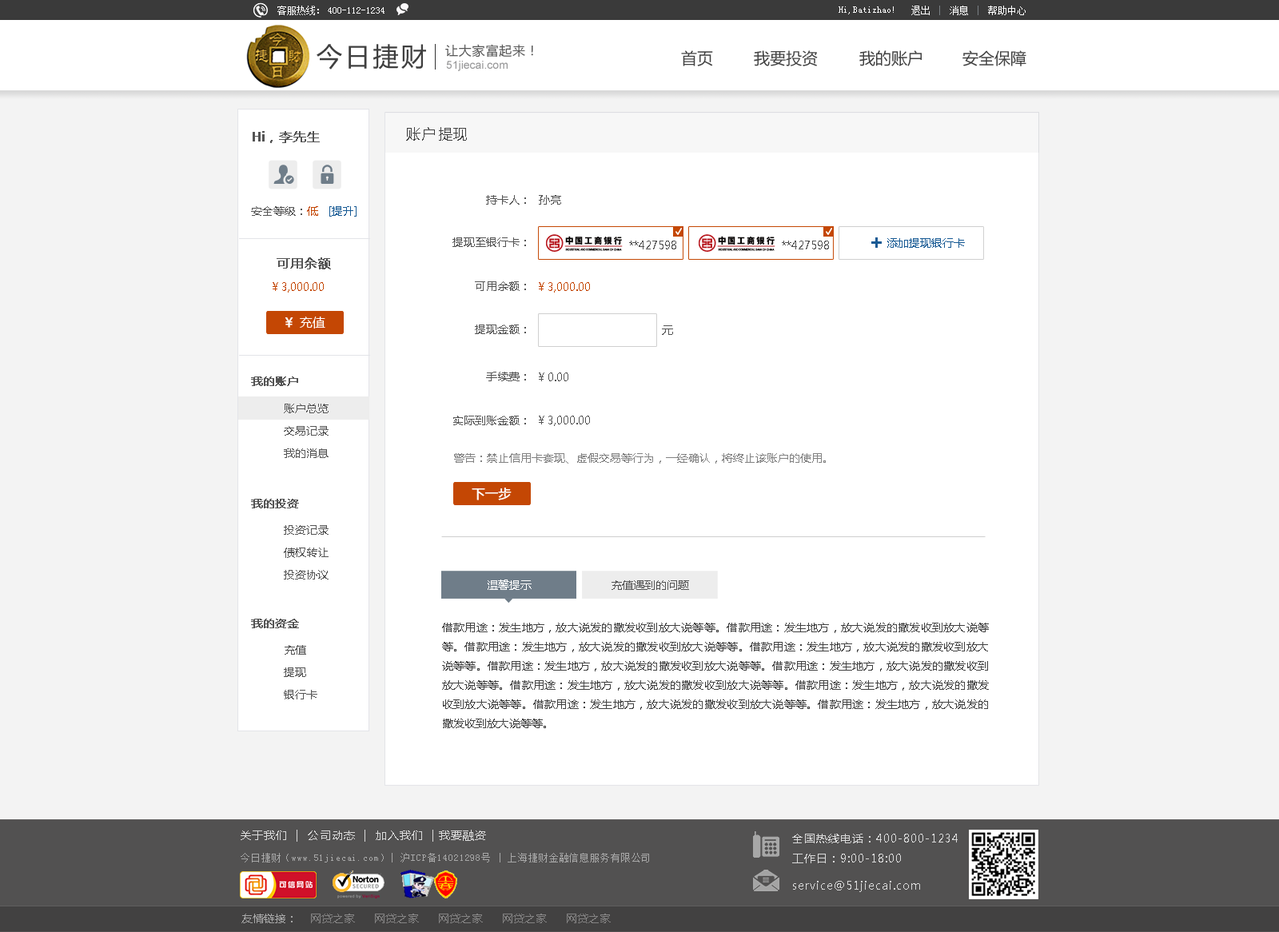
<style>
.page{position:relative;width:1279px;height:932px;background:#ffffff}
.page>*{position:absolute;margin:0}
.t1{font:9.6px "SimSun";color:#ffffff}
.t2{font:25.6px "MicrosoftYaHei";letter-spacing:0.1em;color:#3f3f3f}
.t3{font:12.8px "MicrosoftYaHei";letter-spacing:0.05em;color:#575757}
.t4{font:16px "MicrosoftYaHei";color:#414141}
.t5{font:11.2px "ArialMT";color:#969697}
.t6{font:12.8px "MicrosoftYaHei";color:#545454;font-weight:bold}
.t7{font:14.4px "MicrosoftYaHei";letter-spacing:0.1em;color:#3f3f3f}
.t8{font:11.2px "MicrosoftYaHei";color:#545454}
.t9{font:11.2px "MicrosoftYaHei";color:#c44704}
.t10{font:11.2px "MicrosoftYaHei";color:#175a94}
.t11{font:19.2px "MicrosoftYaHei";color:#175a94;font-weight:bold}
.t12{font:11.2px "MicrosoftYaHei";color:#c44703}
.t13{font:12.8px "MicrosoftYaHei";color:#ffffff}
.t14{font:12.8px "MicrosoftYaHei";color:#ffffff;font-weight:bold}
.t15{font:11.2px "MicrosoftYaHei";color:#545454;font-weight:bold}
.t16{font:11.2px/22.4px "MicrosoftYaHei";color:#545454}
.t17{font:11.2px "MicrosoftYaHei";color:#828282}
.t18{font:11.2px "MicrosoftYaHei";color:#ffffff}
.t19{font:11.2px/19.2px "MicrosoftYaHei";color:#414141}
.t20{font:11.2px "MicrosoftYaHei";letter-spacing:0.07em;color:#dbdbdb}
.t21{font:11.2px "MicrosoftYaHei";letter-spacing:0.07em;color:#dadada}
.t22{font:9.6px "SimSun";letter-spacing:0.07em;color:#a7a7a7}
.t23{font:11.2px "MicrosoftYaHei";color:#858484}
.t24{font:11.2px "MicrosoftYaHei";color:#a7a7a7}
</style>
<div class="page">
<p class="t1" style="left:277px;top:6px;width:42px;height:9px">客服热线：</p>
<p class="t1" style="left:911px;top:6px;width:115px;height:9px">退出    消息    帮助中心</p>
<p class="t1" style="left:328px;top:7px;width:57px;height:7px">400-112-1234</p>
<p class="t1" style="left:839px;top:6px;width:55px;height:8px">Hi,Batizhao!</p>
<p class="t2" style="left:317px;top:44px;width:109px;height:26px">今日捷财</p>
<p class="t3" style="left:445px;top:44px;width:88px;height:13px">让大家富起来！</p>
<p class="t4" style="left:681px;top:50px;width:32px;height:16px">首页</p>
<p class="t4" style="left:754px;top:50px;width:64px;height:16px">我要投资</p>
<p class="t4" style="left:859px;top:50px;width:63px;height:16px">我的账户</p>
<p class="t4" style="left:963px;top:50px;width:64px;height:16px">安全保障</p>
<p class="t5" style="left:446px;top:61px;width:62px;height:10px">51jiecai.com</p>
<p class="t6" style="left:253px;top:131px;width:67px;height:12px">Hi，李先生</p>
<p class="t7" style="left:406px;top:127px;width:61px;height:14px">账户提现</p>
<p class="t8" style="left:486px;top:195px;width:40px;height:10px">持卡人：</p>
<p class="t8" style="left:539px;top:195px;width:22px;height:10px">孙亮</p>
<p class="t8" style="left:251px;top:206px;width:106px;height:11px">安全等级：<span class="t9">低   </span><span class="t10">[提升]</span></p>
<p class="t8" style="left:453px;top:237px;width:73px;height:10px">提现至银行卡：</p>
<p class="t8" style="left:629px;top:241px;width:47px;height:8px">**427598</p>
<p class="t8" style="left:782px;top:241px;width:47px;height:8px">**427598</p>
<p class="t11" style="left:871px;top:237px;width:11px;height:11px">+</p>
<p class="t10" style="left:887px;top:238px;width:78px;height:10px">添加提现银行卡</p>
<p class="t6" style="left:277px;top:257px;width:54px;height:12px">可用余额</p>
<p class="t8" style="left:475px;top:281px;width:51px;height:10px">可用余额：</p>
<p class="t12" style="left:273px;top:282px;width:51px;height:11px">￥3,000.00</p>
<p class="t12" style="left:539px;top:282px;width:51px;height:11px">￥3,000.00</p>
<p class="t13" style="left:285px;top:317px;width:40px;height:12px"><span class="t14">￥ </span>充值</p>
<p class="t8" style="left:475px;top:325px;width:51px;height:9px">提现金额：</p>
<p class="t8" style="left:662px;top:325px;width:11px;height:10px">元</p>
<p class="t15" style="left:251px;top:377px;width:47px;height:9px">我的账户</p>
<p class="t8" style="left:486px;top:372px;width:40px;height:9px">手续费：</p>
<p class="t8" style="left:539px;top:373px;width:29px;height:8px">￥0.00</p>
<p class="t16" style="left:284px;top:404px;width:45px;height:54px">账户总览<br>交易记录<br>我的消息</p>
<p class="t8" style="left:453px;top:416px;width:73px;height:9px">实际到账金额：</p>
<p class="t8" style="left:539px;top:416px;width:51px;height:10px">￥3,000.00</p>
<p class="t17" style="left:454px;top:453px;width:372px;height:11px">警告：禁止信用卡套现、虚假交易等行为，一经确认，将终止该账户的使用。</p>
<p class="t14" style="left:472px;top:488px;width:40px;height:12px">下一步</p>
<p class="t15" style="left:251px;top:499px;width:48px;height:9px">我的投资</p>
<p class="t16" style="left:284px;top:525px;width:45px;height:55px">投资记录<br>债权转让<br>投资协议</p>
<p class="t18" style="left:488px;top:580px;width:44px;height:10px">温馨提示</p>
<p class="t8" style="left:612px;top:580px;width:77px;height:10px">充值遇到的问题</p>
<p class="t15" style="left:251px;top:619px;width:48px;height:9px">我的资金</p>
<p class="t19" style="left:442px;top:623px;width:547px;height:105px;text-align:justify">借款用途：发生地方，放大说发的撒发收到放大说等等。借款用途：发生地方，放大说发的撒发收到放大说等等。借款用途：发生地方，放大说发的撒发收到放大说等等。借款用途：发生地方，放大说发的撒发收到放大说等等。借款用途：发生地方，放大说发的撒发收到放大说等等。借款用途：发生地方，放大说发的撒发收到放大说等等。借款用途：发生地方，放大说发的撒发收到放大说等等。借款用途：发生地方，放大说发的撒发收到放大说等等。借款用途：发生地方，放大说发的撒发收到放大说等等。借款用途：发生地方，放大说发的撒发收到放大说等等。</p>
<p class="t16" style="left:284px;top:645px;width:33px;height:55px">充值<br>提现<br>银行卡</p>
<p class="t20" style="left:241px;top:830px;width:245px;height:12px">关于我们  |  公司动态  |  加入我们  | 我要融资</p>
<p class="t21" style="left:792px;top:834px;width:166px;height:29px">全国热线电话：400-800-1234<br>工作日：9:00-18:00</p>
<p class="t22" style="left:241px;top:853px;width:408px;height:10px">今日捷财（www.51jiecai.com）| 沪ICP备14021298号 | 上海捷财金融信息服务有限公司</p>
<p class="t21" style="left:793px;top:881px;width:127px;height:11px">service@51jiecai.com</p>
<p class="t23" style="left:241px;top:914px;width:370px;height:9px"><span class="t24">友情链接：</span>    网贷之家      网贷之家      网贷之家      网贷之家      网贷之家</p>
</div>
